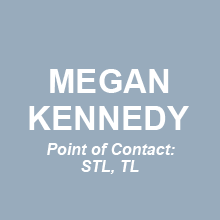
<style>
.page{position:relative;width:220px;height:220px;background:#98abbc}
.page>*{position:absolute;margin:0}
.t1{font:33px "Arial-BoldMT";color:#ffffff}
.t2{font:16px "Arial-BoldItalicMT";color:#ffffff}
</style>
<div class="page">
<p class="t1" style="left:50px;top:69px;width:119px;height:24px">MEGAN</p>
<p class="t1" style="left:29px;top:106px;width:160px;height:24px">KENNEDY</p>
<p class="t2" style="left:47px;top:143px;width:128px;height:12px">Point of Contact:</p>
<p class="t2" style="left:81px;top:160px;width:58px;height:14px">STL, TL</p>
</div>
